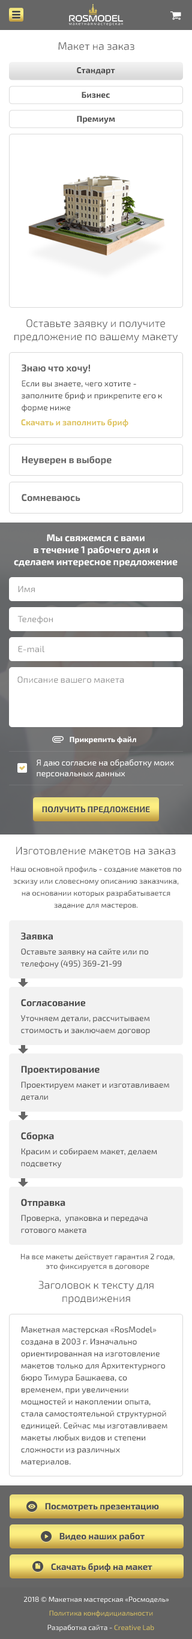
<style>
.page{position:relative;width:192px;height:1639px;background:#ffffff}
.page>*{position:absolute;margin:0}
.t1{font:10.8px "Exo2-Light";color:#4d4d4d}
.t2{font:8.4px "Exo2-Bold";color:#4d4d4d}
.t3{font:9.6px "Exo2-Bold";color:#666666}
.t4{font:8.4px/12px "Exo2-Regular";color:#4d4d4d}
.t5{font:8.4px "Exo2-Bold";color:#dfc560}
.t6{font:9.6px/12px "Exo2-Bold";color:#ffffff}
.t7{font:9px "Exo2-Regular";color:#999999}
.t8{font:7.8px "Exo2-Bold";color:#ffffff}
.t9{font:8.4px/10.8px "Exo2-Regular";color:#ffffff}
.t10{font:8.4px "Exo2-Bold";color:#4d4d4d;text-transform:uppercase}
.t11{font:7.8px/12px "Exo2-Regular";color:#4d4d4d}
.t12{font:9.6px "Exo2-Bold";color:#4d4d4d}
.t13{font:7.8px "Exo2-Regular";color:#4d4d4d}
</style>
<div class="page">
<p class="t1" style="left:58px;top:42px;width:76px;height:8px">Макет на заказ</p>
<p class="t2" style="left:77px;top:67px;width:38px;height:8px">Стандарт</p>
<p class="t2" style="left:82px;top:92px;width:28px;height:6px">Бизнес</p>
<p class="t2" style="left:77px;top:116px;width:38px;height:8px">Премиум</p>
<p class="t1" style="left:14px;top:319px;width:164px;height:24px;text-align:center">Оставьте заявку и получите<br>предложение по вашему макету</p>
<p class="t3" style="left:22px;top:364px;width:68px;height:10px">Знаю что хочу!</p>
<p class="t4" style="left:22px;top:380px;width:140px;height:32px">Если вы знаете, чего хотите - заполните бриф и прикрепите его к форме ниже</p>
<p class="t5" style="left:21px;top:419px;width:107px;height:8px">Скачать и заполнить бриф</p>
<p class="t3" style="left:22px;top:456px;width:90px;height:10px">Неуверен в выборе</p>
<p class="t3" style="left:22px;top:494px;width:58px;height:8px">Сомневаюсь</p>
<p class="t6" style="left:14px;top:534px;width:164px;height:33px;text-align:center">Мы свяжемся с вами<br>в течение 1 рабочего дня и<br>сделаем интересное предложение</p>
<p class="t7" style="left:18px;top:586px;width:17px;height:6px">Имя</p>
<p class="t7" style="left:17px;top:616px;width:36px;height:8px">Телефон</p>
<p class="t7" style="left:18px;top:646px;width:26px;height:7px">E-mail</p>
<p class="t7" style="left:17px;top:676px;width:107px;height:7px">Описание вашего макета</p>
<p class="t8" style="left:70px;top:736px;width:66px;height:8px">Прикрепить файл</p>
<p class="t9" style="left:37px;top:759px;width:137px;height:19px">Я даю согласие на обработку моих <br>персональных данных</p>
<p class="t10" style="left:42px;top:806px;width:108px;height:8px">Получить предложение</p>
<p class="t1" style="left:16px;top:847px;width:160px;height:8px">Изготовление макетов на заказ</p>
<p class="t11" style="left:11px;top:866px;width:170px;height:44px;text-align:center">Наш основной профиль - создание макетов по эскизу или словесному описанию заказчика, на основании которых разрабатывается задание для мастеров.</p>
<p class="t12" style="left:21px;top:932px;width:32px;height:8px">Заявка</p>
<p class="t4" style="left:20px;top:949px;width:128px;height:19px">Оставьте заявку на сайте или по телефону (495) 369-21-99</p>
<p class="t12" style="left:21px;top:999px;width:65px;height:8px">Согласование</p>
<p class="t4" style="left:20px;top:1015px;width:130px;height:20px">Уточняем детали, рассчитываем стоимость и заключаем договор</p>
<p class="t12" style="left:21px;top:1066px;width:79px;height:9px">Проектирование</p>
<p class="t4" style="left:21px;top:1082px;width:148px;height:19px">Проектируем макет и изготавливаем <br>детали</p>
<p class="t12" style="left:21px;top:1132px;width:33px;height:9px">Сборка</p>
<p class="t4" style="left:21px;top:1148px;width:136px;height:20px">Красим и собираем макет, делаем подсветку</p>
<p class="t12" style="left:21px;top:1199px;width:44px;height:9px">Отправка</p>
<p class="t4" style="left:21px;top:1215px;width:127px;height:19px">Проверка,  упаковка и передача готового макета</p>
<p class="t13" style="left:21px;top:1253px;width:154px;height:18px;text-align:center">На все макеты действует гарантия 2 года,<br>это фиксируется в договоре</p>
<p class="t1" style="left:38px;top:1281px;width:116px;height:23px;text-align:center">Заголовок к тексту для<br>продвижения</p>
<p class="t4" style="left:21px;top:1327px;width:146px;height:139px">Макетная мастерская «RosModel» создана в 2003 г. Изначально ориентированная на изготовление макетов только для Архитектурного бюро Тимура Башкаева, со временем, при увеличении мощностей и накоплении опыта, стала самостоятельной структурной единицей. Сейчас мы изготавливаем макеты любых видов и степени сложности из различных материалов.</p>
</div>
